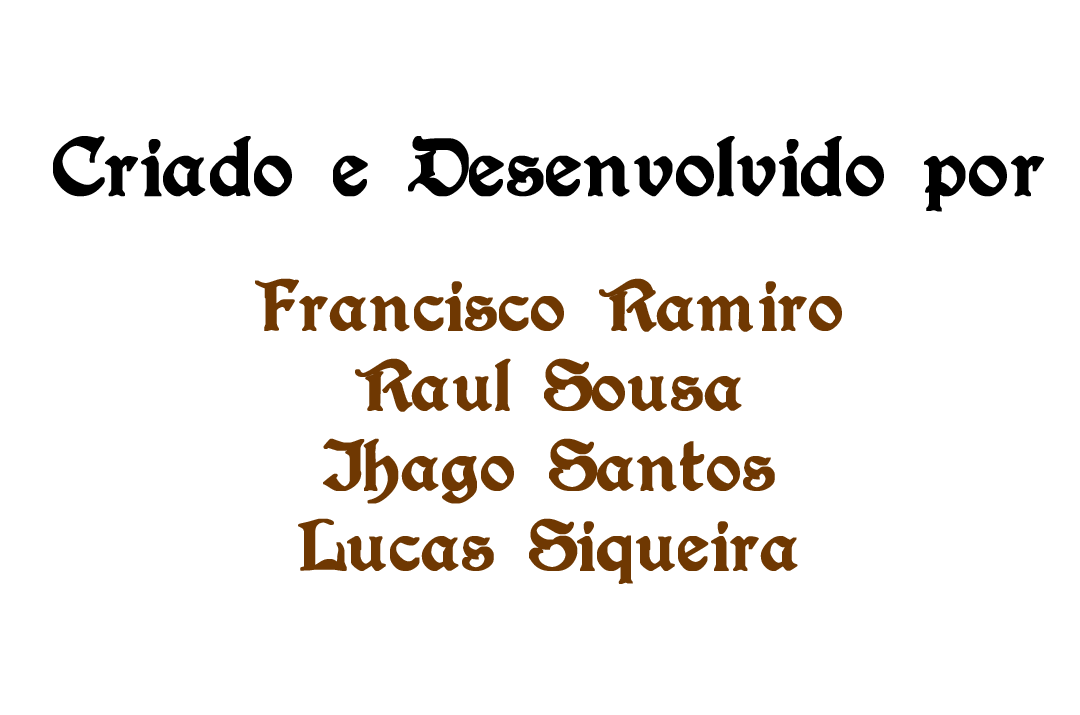
<style>
.page{position:relative;width:1080px;height:715px;background:#ffffff}
.page>*{position:absolute;margin:0}
.t1{font:92.2px "Augusta-Regular";color:#000000;font-weight:bold}
.t2{font:80px/80px "Augusta-Regular";color:#6f3802;font-weight:bold}
</style>
<div class="page">
<p class="t1" style="left:53px;top:136px;width:991px;height:76px">Criado e Desenvolvido por</p>
<p class="t2" style="left:255px;top:278px;width:587px;height:306px;text-align:center">Francisco Ramiro<br>Raul Sousa<br>Ihago Santos<br>Lucas Siqueira</p>
</div>
